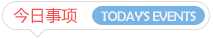
<style>
.page{position:relative;width:213px;height:39px;background:#ffffff}
.page>*{position:absolute;margin:0}
.t1{font:16px "MicrosoftYaHei";color:#f85050;text-transform:uppercase}
.t2{font:14px "BerlinSansFB-Reg";letter-spacing:-0.05em;color:#f2f2f2;text-transform:uppercase}
</style>
<div class="page">
<p class="t1" style="left:13px;top:7px;width:64px;height:17px">今日事项</p>
<p class="t2" style="left:101px;top:11px;width:95px;height:10px">Today's events</p>
</div>
